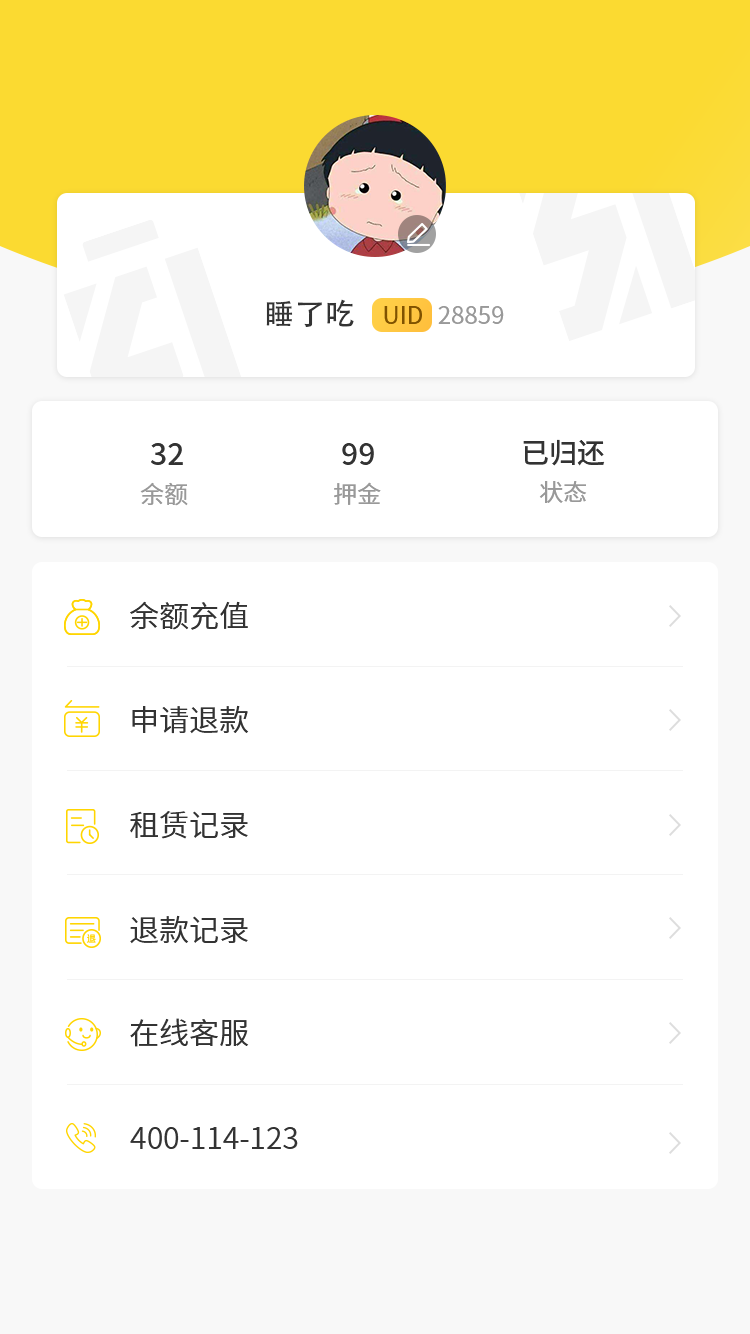
<style>
.page{position:relative;width:750px;height:1334px;background:#ffffff}
.page>*{position:absolute;margin:0}
.t1{font:30px "AdobeHeitiStd-Regular";color:#333333}
.t2{font:24px "SourceHanSansSC-Regular";color:#805200}
.t3{font:24px "SourceHanSansSC-Regular";color:#999999}
.t4{font:30px "SourceHanSansSC-Medium";color:#333333}
.t5{font:28px "SourceHanSansSC-Medium";color:#333333}
.t6{font:30px "SourceHanSansSC-Normal";color:#333333}
</style>
<div class="page">
<p class="t1" style="left:266px;top:299px;width:88px;height:28px">睡了吃</p>
<p class="t2" style="left:384px;top:306px;width:38px;height:18px">UID</p>
<p class="t3" style="left:438px;top:306px;width:66px;height:18px">28859</p>
<p class="t4" style="left:151px;top:443px;width:32px;height:22px">32</p>
<p class="t4" style="left:342px;top:443px;width:32px;height:22px">99</p>
<p class="t5" style="left:523px;top:439px;width:82px;height:27px">已归还</p>
<p class="t3" style="left:140px;top:482px;width:48px;height:24px">余额</p>
<p class="t3" style="left:334px;top:482px;width:47px;height:23px">押金</p>
<p class="t3" style="left:539px;top:481px;width:48px;height:22px">状态</p>
<p class="t6" style="left:130px;top:601px;width:118px;height:29px">余额充值</p>
<p class="t6" style="left:132px;top:705px;width:117px;height:29px">申请退款</p>
<p class="t6" style="left:130px;top:811px;width:118px;height:28px">租赁记录</p>
<p class="t6" style="left:130px;top:915px;width:118px;height:29px">退款记录</p>
<p class="t6" style="left:130px;top:1018px;width:119px;height:29px">在线客服</p>
<p class="t6" style="left:130px;top:1127px;width:168px;height:22px">400-114-123</p>
</div>
